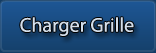
<style>
.page{position:relative;width:156px;height:53px}
.page>*{position:absolute;margin:0}
.t1{font:20px "MyriadPro-Regular";color:#d3deeb}
</style>
<div class="page">
<p class="t1" style="left:20px;top:17px;width:114px;height:19px">Charger Grille</p>
</div>
